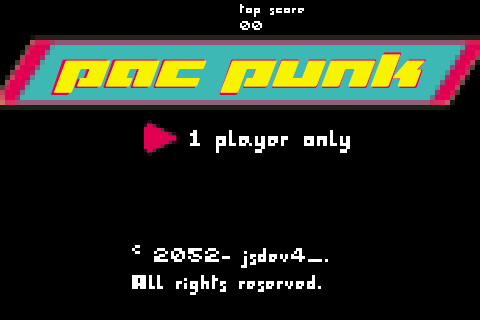
<style>
.page{position:relative;width:480px;height:320px;background:#000000}
.page>*{position:absolute;margin:0}
.t1{font:14px "I-pixel-u";color:#ffffff;scale:1.13 1}
.t2{font:63px "TurboChargeSuper-Italic";color:#f8f400;scale:0.97 1}
.t3{font:56.4px "TurboChargeSuper-Italic";color:#f8f400;scale:1.07 1}
.t4{font:26px "I-pixel-u";color:#ffffff}
.t5{font:22px "I-pixel-u";color:#ffffff}
</style>
<div class="page">
<p class="t1" style="left:240px;top:4px;width:64px;height:26px">top score<br>00</p>
<p class="t2" style="left:50px;top:52px;width:376px;height:43px">pac punk</p>
<p class="t3" style="left:54px;top:54px;width:371px;height:39px">pac punk</p>
<p class="t4" style="left:190px;top:130px;width:160px;height:23px">1 player only</p>
<p class="t5" style="left:132px;top:245px;width:196px;height:50px">© 2052- jsdev4_.<br>All rights reserved.</p>
</div>
